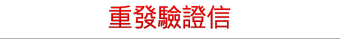
<style>
.page{position:relative;width:340px;height:40px;background:#ffffff}
.page>*{position:absolute;margin:0}
.t1{font:26px "MicrosoftJhengHeiRegular";letter-spacing:-0.05em}
</style>
<div class="page">
<p class="t1" style="left:108px;top:5px;width:123px;height:24px">重發驗證信</p>
</div>
